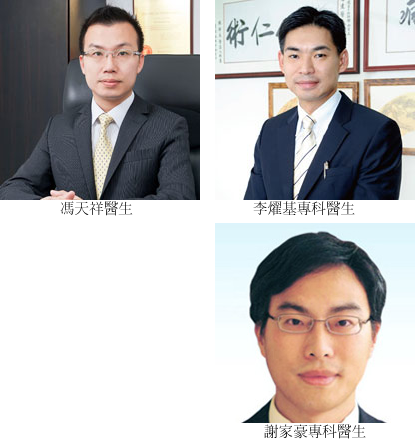
<style>
.page{position:relative;width:415px;height:443px;background:#ffffff}
.page>*{position:absolute;margin:0}
.t1{font:14.6px "AdobeMingStd-Light"}
.t2{font:14.6px "AdobeMingStd-Light";color:#000000}
</style>
<div class="page">
<p class="t1" style="left:60px;top:201px;width:73px;height:15px">馮天祥醫生</p>
<p class="t2" style="left:253px;top:201px;width:102px;height:15px">李燿基專科醫生</p>
<p class="t2" style="left:264px;top:424px;width:102px;height:15px">謝家豪專科醫生</p>
</div>
